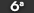
<style>
.page{position:relative;width:34px;height:13px;background:#333333}
.page>*{position:absolute;margin:0}
.t1{font:13.9px "K2D-ExtraBold";color:#ffffff}
</style>
<div class="page">
<p class="t1" style="left:10px;top:1px;width:14px;height:11px">6a</p>
</div>
